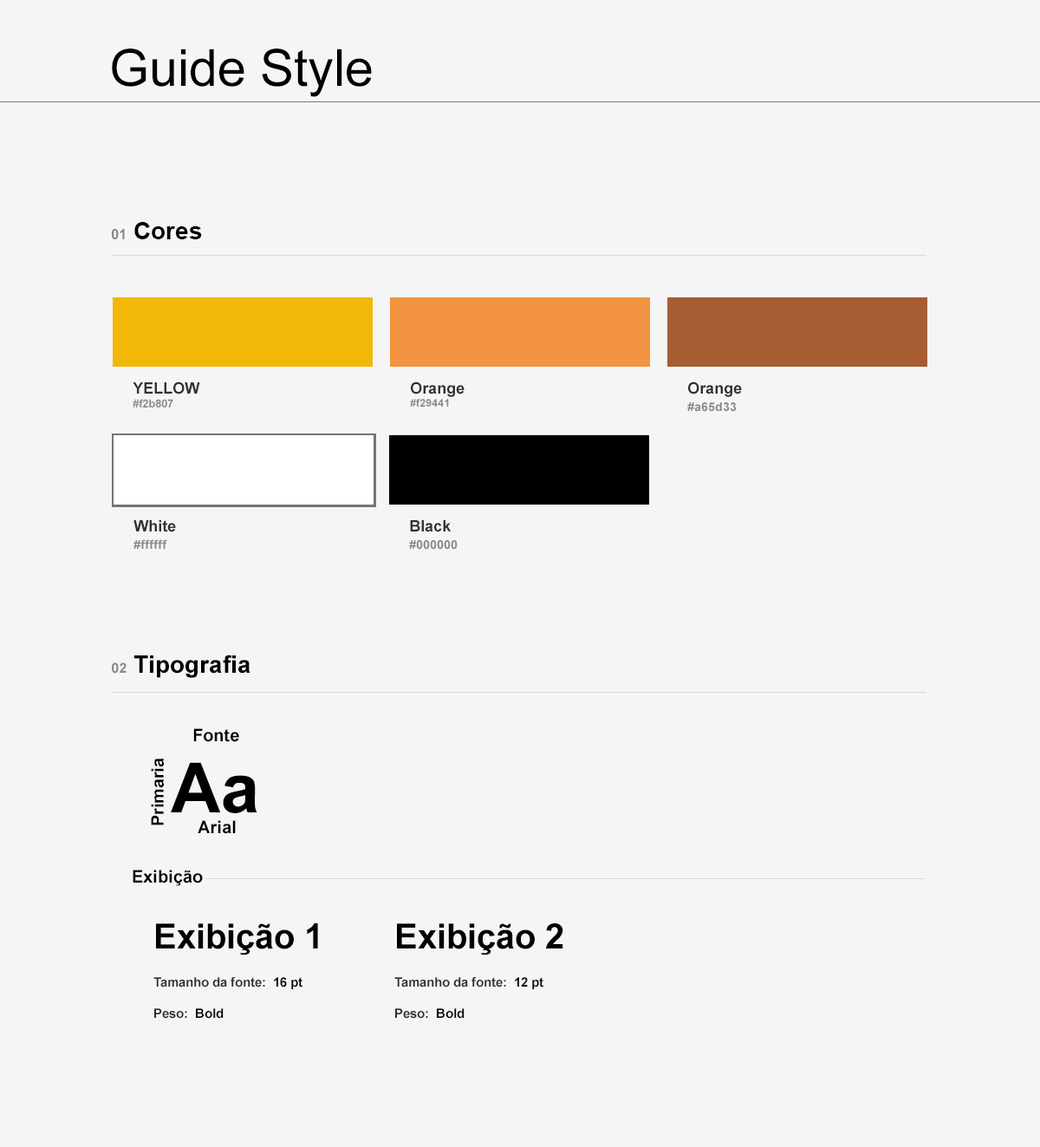
<style>
.page{position:relative;width:1040px;height:1147px;background:#f5f5f5}
.page>*{position:absolute;margin:0}
.t1{font:51.1px "ArialMT";color:#000000}
.t2{font:24.3px "Arial-BoldMT";color:#000000}
.t3{font:13.9px "Arial-BoldMT";color:#888888}
.t4{font:11.3px "Arial-BoldMT";color:#888888}
.t5{font:15.6px "Arial-BoldMT";color:#313131}
.t6{font:10.4px "Arial-BoldMT";color:#888888}
.t7{font:12.1px/17.3px "Arial-BoldMT";color:#888888}
.t8{font:17.3px "Arial-BoldMT";color:#000000}
.t9{font:69.3px "Arial-BoldMT";color:#000000}
.t10{font:34.7px "Arial-BoldMT";color:#000000}
.t11{font:13px "Arial-BoldMT";color:#2d2d2d}
.t12{font:13px "Arial-BoldMT";color:#000000}
</style>
<div class="page">
<p class="t1" style="left:112px;top:49px;width:260px;height:48px">Guide Style</p>
<p class="t2" style="left:111px;top:222px;width:91px;height:17px"><span class="t3">01 </span>Cores</p>
<p class="t4" style="left:133px;top:381px;width:67px;height:26px"><span class="t5">YELLOW<br></span>#f2b807</p>
<p class="t6" style="left:410px;top:381px;width:55px;height:25px"><span class="t5">Orange<br></span>#f29441</p>
<p class="t7" style="left:687px;top:381px;width:55px;height:31px"><span class="t5">Orange<br></span>#a65d33</p>
<p class="t7" style="left:133px;top:520px;width:43px;height:29px"><span class="t5">White<br></span>#ffffff</p>
<p class="t7" style="left:409px;top:520px;width:49px;height:29px"><span class="t5">Black<br></span>#000000</p>
<p class="t2" style="left:112px;top:654px;width:138px;height:24px"><span class="t3">02 </span>Tipografia</p>
<p class="t8" style="left:193px;top:728px;width:46px;height:14px">Fonte</p>
<p class="t8" style="left:151px;top:757px;width:13px;height:68px;rotate:-90deg">Primaria</p>
<p class="t8" style="left:171px;top:762px;width:86px;height:72px"><span class="t9">Aa<br>  </span>    Arial</p>
<p class="t8" style="left:133px;top:869px;width:70px;height:17px">Exibição</p>
<p class="t10" style="left:156px;top:923px;width:162px;height:32px">Exibição 1</p>
<p class="t10" style="left:397px;top:923px;width:166px;height:32px">Exibição 2</p>
<p class="t11" style="left:153px;top:977px;width:149px;height:41px">Tamanho da fonte:<span class="t12">  16 pt<br></span><br>Peso:<span class="t12">  Bold</span></p>
<p class="t11" style="left:394px;top:977px;width:149px;height:41px">Tamanho da fonte:<span class="t12">  12 pt<br></span><br>Peso:<span class="t12">  Bold</span></p>
</div>
